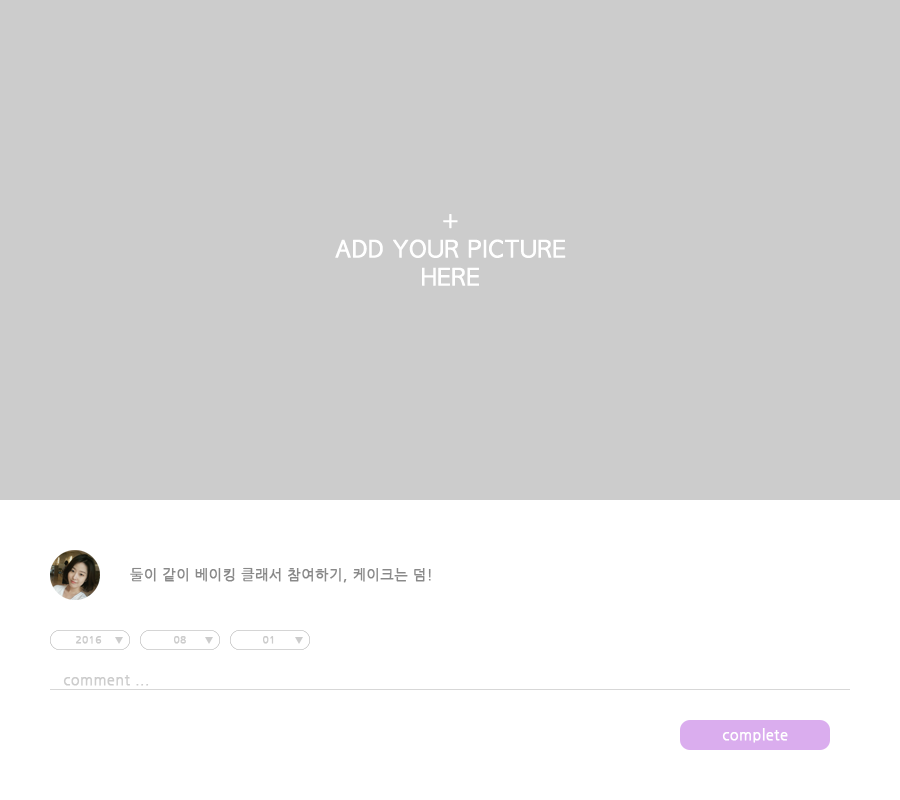
<style>
.page{position:relative;width:900px;height:800px;background:#cccccc}
.page>*{position:absolute;margin:0}
.t1{font:14px "NanumGothic";letter-spacing:0.025em;color:#898989;font-weight:bold}
.t2{font:10px "NanumGothic";letter-spacing:0.025em;color:#cccccc;font-weight:bold}
.t3{font:14px "NanumGothic";letter-spacing:0.025em;color:#cccccc;font-weight:bold}
.t4{font:14px "NanumGothic";letter-spacing:0.025em;color:#ffffff;font-weight:bold}
</style>
<div class="page">
<p class="t1" style="left:130px;top:567px;width:301px;height:16px">둘이 같이 베이킹 클래서 참여하기, 케이크는 덤!</p>
<p class="t2" style="left:76px;top:636px;width:26px;height:8px">2016</p>
<p class="t2" style="left:174px;top:636px;width:12px;height:8px">08</p>
<p class="t2" style="left:263px;top:636px;width:11px;height:8px">01</p>
<p class="t3" style="left:63px;top:675px;width:86px;height:11px">comment ...</p>
<p class="t4" style="left:722px;top:728px;width:66px;height:15px">complete</p>
</div>
